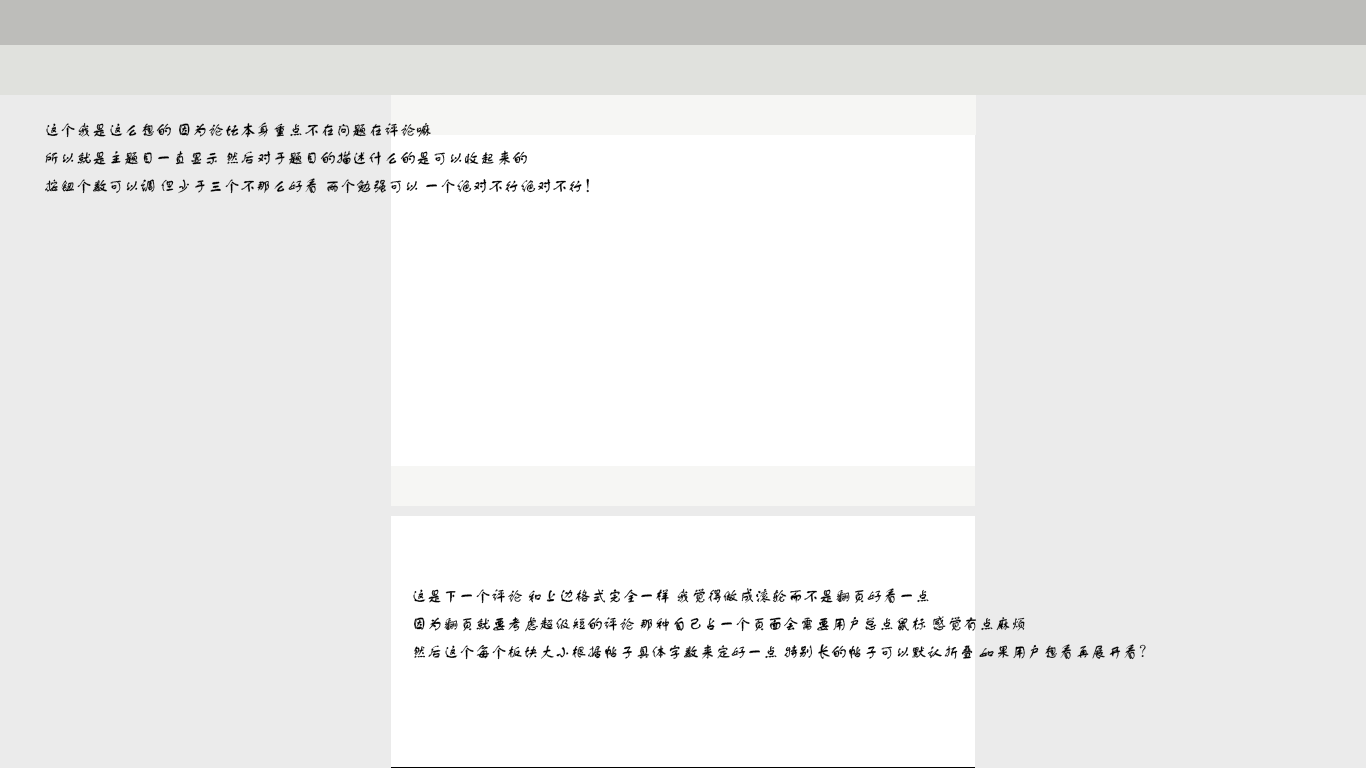
<style>
.page{position:relative;width:1366px;height:768px;background:#ebebeb}
.page>*{position:absolute;margin:0}
.t1{font:16px "FZSTK--GBK1-0";color:#000000}
</style>
<div class="page">
<p class="t1" style="left:45px;top:122px;width:544px;height:72px">这个我是这么想的 因为论坛本身重点不在问题在评论嘛<br>所以就是主题目一直显示 然后对于题目的描述什么的是可以收起来的<br>按钮个数可以调 但少于三个不那么好看 两个勉强可以 一个绝对不行绝对不行！</p>
<p class="t1" style="left:413px;top:588px;width:733px;height:72px">这是下一个评论 和上边格式完全一样 我觉得做成滚轮而不是翻页好看一点<br>因为翻页就要考虑超级短的评论 那种自己占一个页面会需要用户总点鼠标 感觉有点麻烦<br>然后这个每个板块大小根据帖子具体字数来定好一点 特别长的帖子可以默认折叠 如果用户想看再展开看？</p>
</div>
